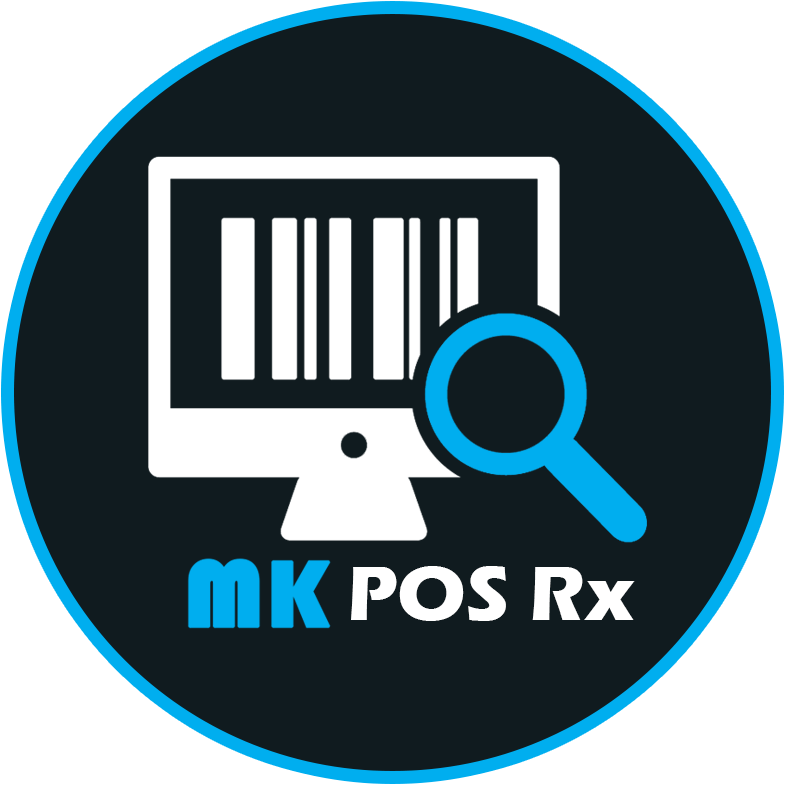
<style>
.page{position:relative;width:788px;height:785px;background:#101b1f}
.page>*{position:absolute;margin:0}
.t1{font:79.1px "ErasITC-Bold";color:#ffffff}
</style>
<div class="page">
<p class="t1" style="left:351px;top:566px;width:284px;height:55px">POS Rx</p>
</div>
